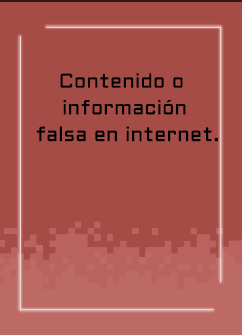
<style>
.page{position:relative;width:242px;height:335px;background:#a54c47}
.page>*{position:absolute;margin:0}
.t1{font:20px/26.7px "Aldrich-Regular";letter-spacing:0.015em;color:#000000}
</style>
<div class="page">
<p class="t1" style="left:36px;top:73px;width:182px;height:69px;text-align:center">Contenido o <br>información<br> falsa en internet.</p>
</div>
